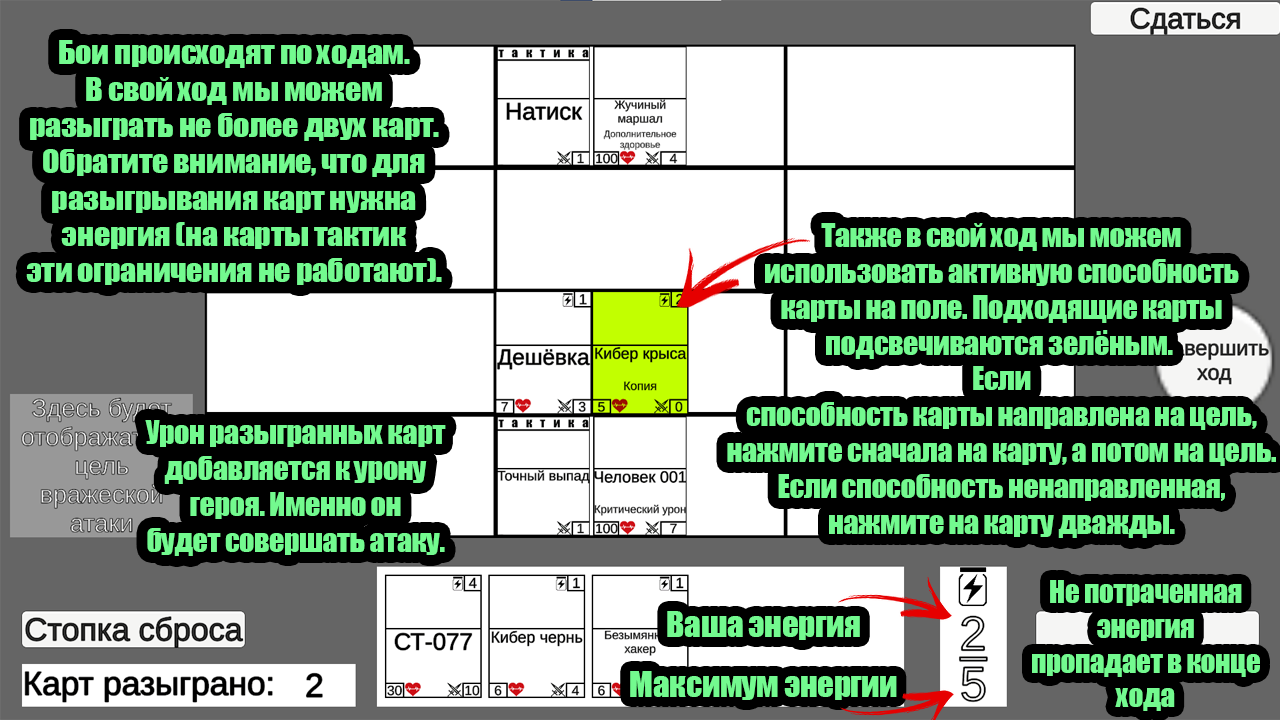
<style>
.page{position:relative;width:1280px;height:720px;background:#ffffff}
.page>*{position:absolute;margin:0}
.t1{font:30.3px/18.2px "Impact";letter-spacing:-0.015em;color:#73fa8f;scale:1.06 1}
.t2{font:30px/17.9px "Impact";letter-spacing:-0.015em;color:#73fa8f}
.t3{font:29px/17.4px "Impact";letter-spacing:-0.015em;color:#73fa8f}
.t4{font:33.3px/19.9px "Impact";letter-spacing:-0.015em;color:#73fa8f}
</style>
<div class="page">
<p class="t1" style="left:26px;top:40px;width:416px;height:245px;text-align:center">Бои происходят по ходам.<br><br>В свой ход мы можем<br><br>разыграть не более двух карт.<br><br>Обратите внимание, что для<br><br>разыгрывания карт нужна<br><br>энергия (на карты тактик<br><br>эти ограничения не работают).</p>
<p class="t2" style="left:727px;top:223px;width:549px;height:315px;text-align:center">Также в свой ход мы можем<br><br>использовать активную способность<br><br>карты на поле. Подходящие карты<br><br>подсвечиваются зелёным. <br><br>Если<br><br>способность карты направлена на цель,<br><br>нажмите сначала на карту, а потом на цель.<br><br>Если способность ненаправленная,<br><br>нажмите на карту дважды.</p>
<p class="t2" style="left:145px;top:420px;width:301px;height:136px;text-align:center">Урон разыгранных карт<br><br>добавляется к урону<br><br>героя. Именно он<br><br>будет совершать атаку.</p>
<p class="t3" style="left:1032px;top:580px;width:228px;height:131px;text-align:center">Не потраченная<br><br>энергия<br><br>пропадает в конце<br><br>хода</p>
<p class="t4" style="left:630px;top:611px;width:267px;height:89px;text-align:center">Ваша энергия<br><br><br>Максимум энергии</p>
</div>
